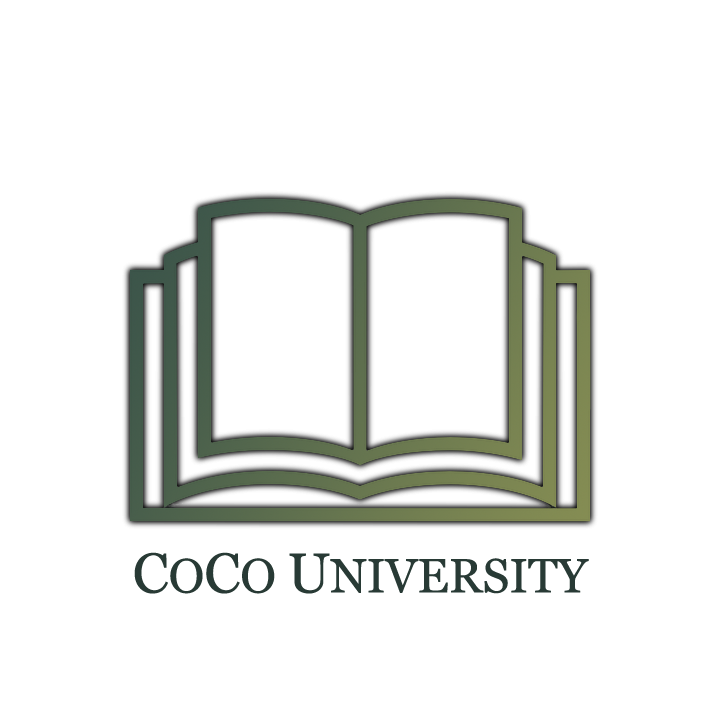
<style>
.page{position:relative;width:720px;height:720px;background:#ffffff}
.page>*{position:absolute;margin:0}
.t1{font:48px "Georgia";color:#283a35}
.t2{font:56px "Georgia";color:#283a35}
</style>
<div class="page">
<p class="t1" style="left:134px;top:552px;width:455px;height:42px"><span class="t2">C</span>O<span class="t2">C</span>O <span class="t2">U</span>NIVERSITY</p>
</div>
